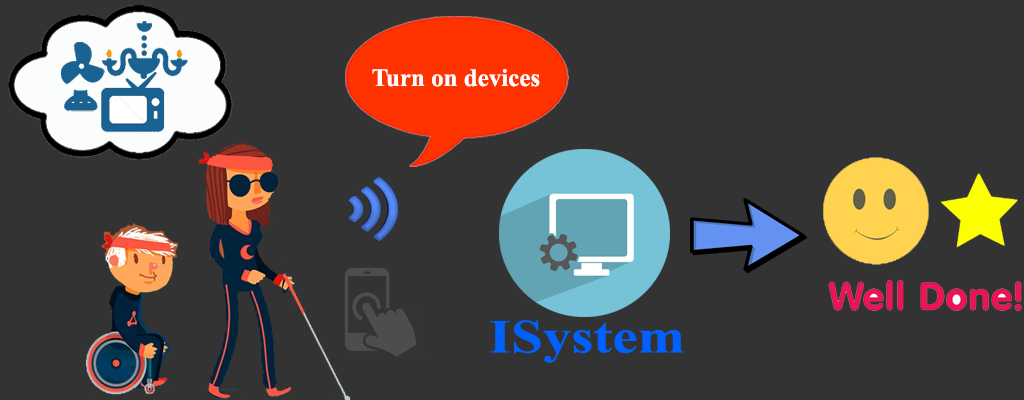
<style>
.page{position:relative;width:1024px;height:400px;background:#333333}
.page>*{position:absolute;margin:0}
.t1{font:25px "TimesNewRomanPS-BoldMT";color:#fefeff}
.t2{font:47.5px "TimesNewRomanPS-BoldMT";color:#0161ff;scale:1.2 1}
</style>
<div class="page">
<p class="t1" style="left:372px;top:69px;width:168px;height:18px">Turn on devices</p>
<p class="t2" style="left:490px;top:320px;width:194px;height:43px">ISystem</p>
</div>
